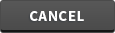
<style>
.page{position:relative;width:115px;height:33px}
.page>*{position:absolute;margin:0}
.t1{font:15px "SourceSansPro-Bold";letter-spacing:0.04em;color:#ffffff}
</style>
<div class="page">
<p class="t1" style="left:30px;top:11px;width:54px;height:10px">CANCEL</p>
</div>
